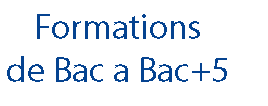
<style>
.page{position:relative;width:268px;height:106px;background:#ffffff}
.page>*{position:absolute;margin:0}
.t1{font:36px "MyriadPro-Regular";color:#054390}
</style>
<div class="page">
<p class="t1" style="left:7px;top:14px;width:220px;height:68px;text-align:center">Formations<br>de Bac a Bac+5</p>
</div>
